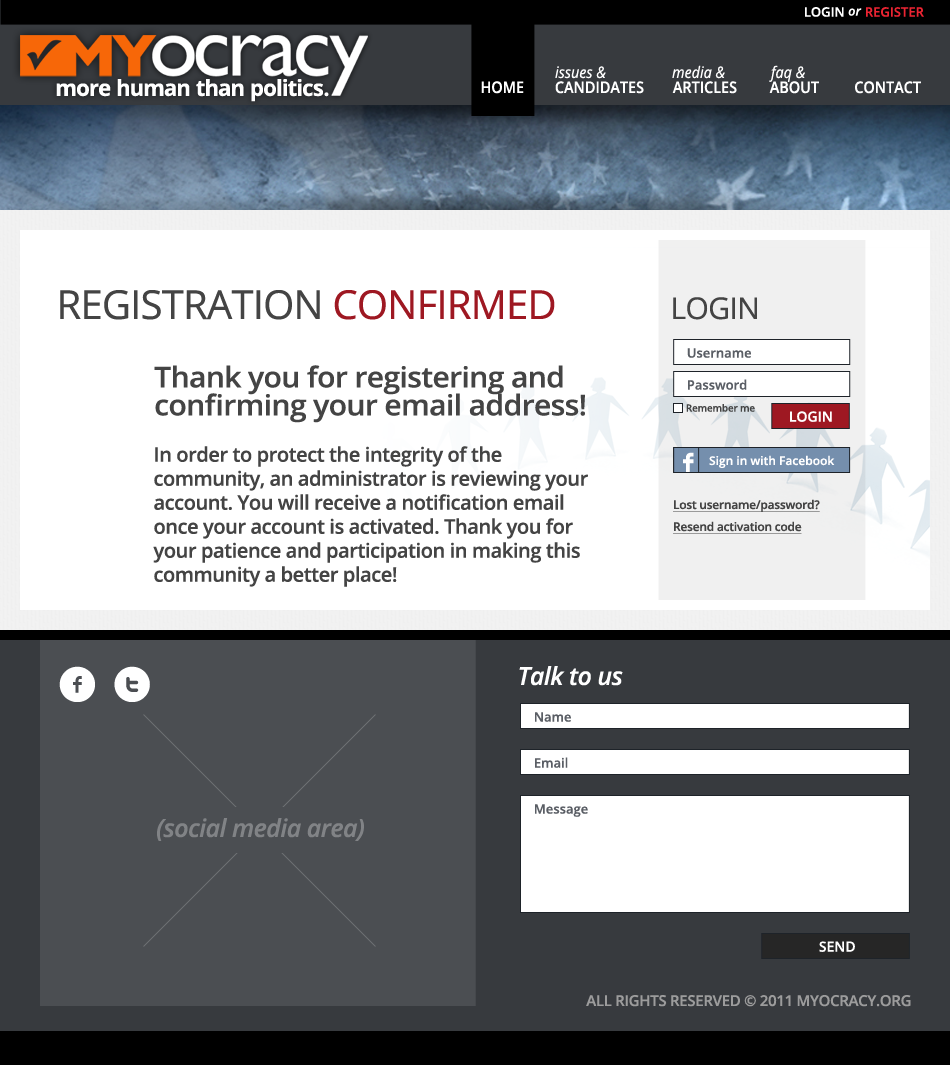
<style>
.page{position:relative;width:950px;height:1065px;background:#ffffff}
.page>*{position:absolute;margin:0}
.t1{font:13px "OpenSans-Semibold";color:#ffffff;text-transform:uppercase}
.t2{font:13px "OpenSans-SemiboldItalic";color:#ffffff}
.t3{font:13px "OpenSans-Semibold";color:#ec2432;text-transform:uppercase}
.t4{font:16px "OpenSans-Italic";color:#ffffff;scale:0.9 1}
.t5{font:22.2px "OpenSans-Bold";letter-spacing:-0.02em;color:#ffffff}
.t6{font:16px "OpenSans-Semibold";color:#ffffff;text-transform:uppercase;scale:0.9 1}
.t7{font:40px "OpenSans";letter-spacing:-0.02em;color:#444444;text-transform:uppercase}
.t8{font:40px "OpenSans";letter-spacing:-0.02em;color:#9e1822;text-transform:uppercase}
.t9{font:30px "OpenSans";letter-spacing:-0.02em;color:#444444;text-transform:uppercase}
.t10{font:13px "OpenSans-Semibold";color:#5a5e65}
.t11{font:28.5px/28px "OpenSans-Semibold";letter-spacing:-0.02em;color:#444444;scale:1.05 1}
.t12{font:10px "OpenSans-Semibold";letter-spacing:-0.02em;color:#444444}
.t13{font:14px "OpenSans-Semibold";color:#ffffff}
.t14{font:20px "OpenSans-Semibold";letter-spacing:-0.02em;color:#444444}
.t15{font:31px "Socialico";color:#ffffff}
.t16{font:12px "OpenSans-Semibold";color:#ffffff}
.t17{font:12px "OpenSans-Semibold";letter-spacing:-0.02em;color:#444444;text-decoration:underline}
.t18{font:50px "Socialico";letter-spacing:0.3em;color:#ffffff}
.t19{font:25px "OpenSans-SemiboldItalic";letter-spacing:-0.02em;color:#ffffff}
.t20{font:25px "OpenSans-SemiboldItalic";letter-spacing:-0.02em;color:#818386}
.t21{font:15px "OpenSans-Semibold";letter-spacing:-0.02em;color:#9c9c9c;text-transform:uppercase}
</style>
<div class="page">
<p class="t1" style="left:805px;top:7px;width:57px;height:10px">Login <span class="t2">or</span></p>
<p class="t3" style="left:866px;top:7px;width:58px;height:10px">Register</p>
<p class="t4" style="left:672px;top:65px;width:53px;height:14px">media &amp;</p>
<p class="t4" style="left:769px;top:65px;width:36px;height:17px">faq &amp;</p>
<p class="t4" style="left:555px;top:66px;width:51px;height:13px">issues &amp;</p>
<p class="t5" style="left:56px;top:79px;width:273px;height:23px">more human than politics.</p>
<p class="t6" style="left:481px;top:81px;width:43px;height:13px">home</p>
<p class="t6" style="left:555px;top:81px;width:89px;height:13px">candidates</p>
<p class="t6" style="left:672px;top:81px;width:65px;height:13px">articles</p>
<p class="t6" style="left:769px;top:81px;width:50px;height:13px">ABOUT</p>
<p class="t6" style="left:855px;top:81px;width:66px;height:13px">contact</p>
<p class="t7" style="left:60px;top:290px;width:495px;height:30px">Registration <span class="t8">Confirmed</span></p>
<p class="t9" style="left:673px;top:297px;width:84px;height:23px">login</p>
<p class="t10" style="left:687px;top:348px;width:64px;height:10px">Username</p>
<p class="t11" style="left:154px;top:365px;width:431px;height:58px">Thank you for registering and confirming your email address!</p>
<p class="t10" style="left:688px;top:379px;width:59px;height:11px">Password</p>
<p class="t12" style="left:686px;top:404px;width:69px;height:8px">Remember me</p>
<p class="t13" style="left:790px;top:411px;width:42px;height:11px">LOGIN</p>
<p class="t14" style="left:153px;top:446px;width:435px;height:141px">In order to protect the integrity of the community, an administrator is reviewing your account. You will receive a notification email once your account is activated. Thank you for your patience and participation in making this community a better place!</p>
<p class="t15" style="left:683px;top:452px;width:11px;height:20px">F</p>
<p class="t16" style="left:709px;top:455px;width:126px;height:13px">Sign in with Facebook</p>
<p class="t17" style="left:673px;top:499px;width:147px;height:13px">Lost username/password?</p>
<p class="t17" style="left:673px;top:521px;width:129px;height:13px">Resend activation code</p>
<p class="t18" style="left:59px;top:666px;width:91px;height:36px">ft</p>
<p class="t19" style="left:519px;top:666px;width:104px;height:20px">Talk to us</p>
<p class="t10" style="left:535px;top:712px;width:36px;height:10px">Name</p>
<p class="t10" style="left:535px;top:757px;width:33px;height:11px">Email</p>
<p class="t10" style="left:535px;top:804px;width:53px;height:13px">Message</p>
<p class="t20" style="left:157px;top:818px;width:207px;height:23px">(social media area)</p>
<p class="t13" style="left:819px;top:941px;width:36px;height:11px">SEND</p>
<p class="t21" style="left:586px;top:995px;width:325px;height:12px">all rights reserved © 2011 myocracy.org</p>
</div>
